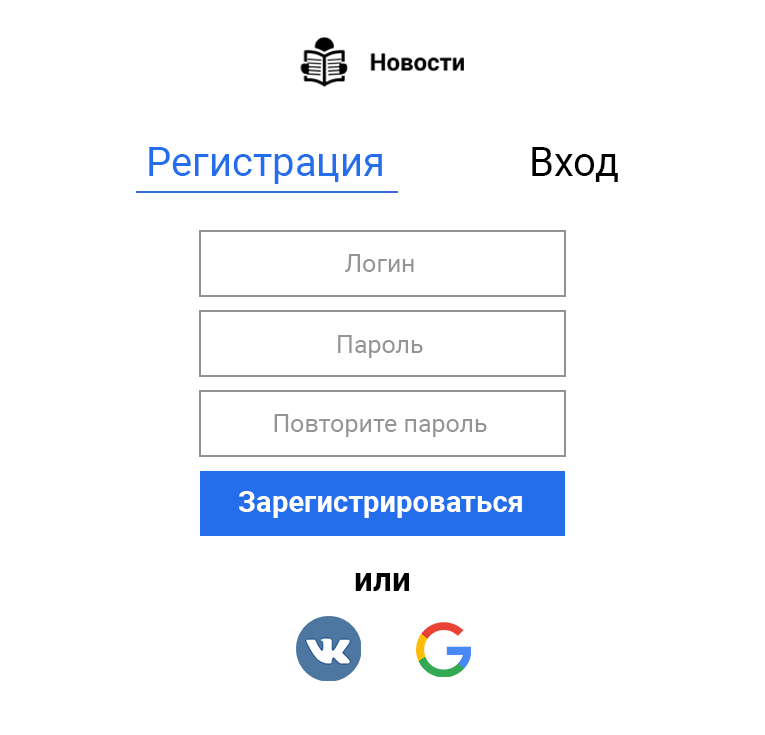
<style>
.page{position:relative;width:765px;height:735px;background:#ffffff}
.page>*{position:absolute;margin:0}
.t1{font:40.2px "Roboto-Regular";color:#256eeb}
.t2{font:40.2px "Roboto-Regular";color:#000000}
.t3{font:25px "Roboto-Regular";color:#949494}
.t4{font:29.3px "Roboto-Bold";color:#ffffff}
.t5{font:33.3px "Roboto-Bold";color:#000000}
</style>
<div class="page">
<p class="t1" style="left:149px;top:147px;width:233px;height:37px">Регистрация</p>
<p class="t2" style="left:532px;top:147px;width:86px;height:35px">Вход</p>
<p class="t3" style="left:345px;top:254px;width:69px;height:18px">Логин</p>
<p class="t3" style="left:338px;top:335px;width:85px;height:23px">Пароль</p>
<p class="t3" style="left:274px;top:414px;width:213px;height:23px">Повторите пароль</p>
<p class="t4" style="left:239px;top:491px;width:283px;height:27px">Зарегистрироваться</p>
<p class="t5" style="left:355px;top:573px;width:54px;height:18px">или</p>
</div>
